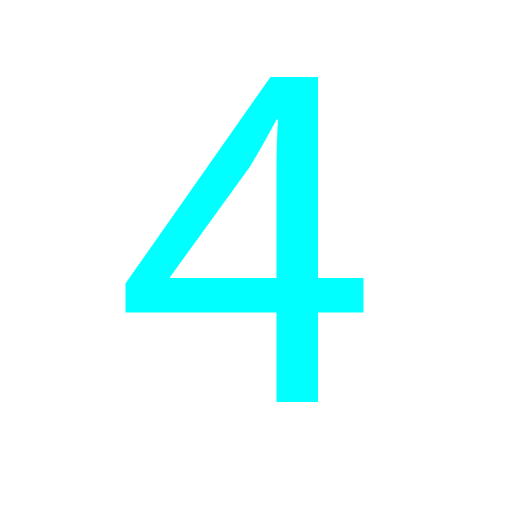
<style>
.page{position:relative;width:512px;height:512px;background:#ffffff}
.page>*{position:absolute;margin:0}
.t1{font:500px "MyriadPro-Regular";color:#00ffff}
</style>
<div class="page">
<p class="t1" style="left:125px;top:77px;width:239px;height:325px">4</p>
</div>
